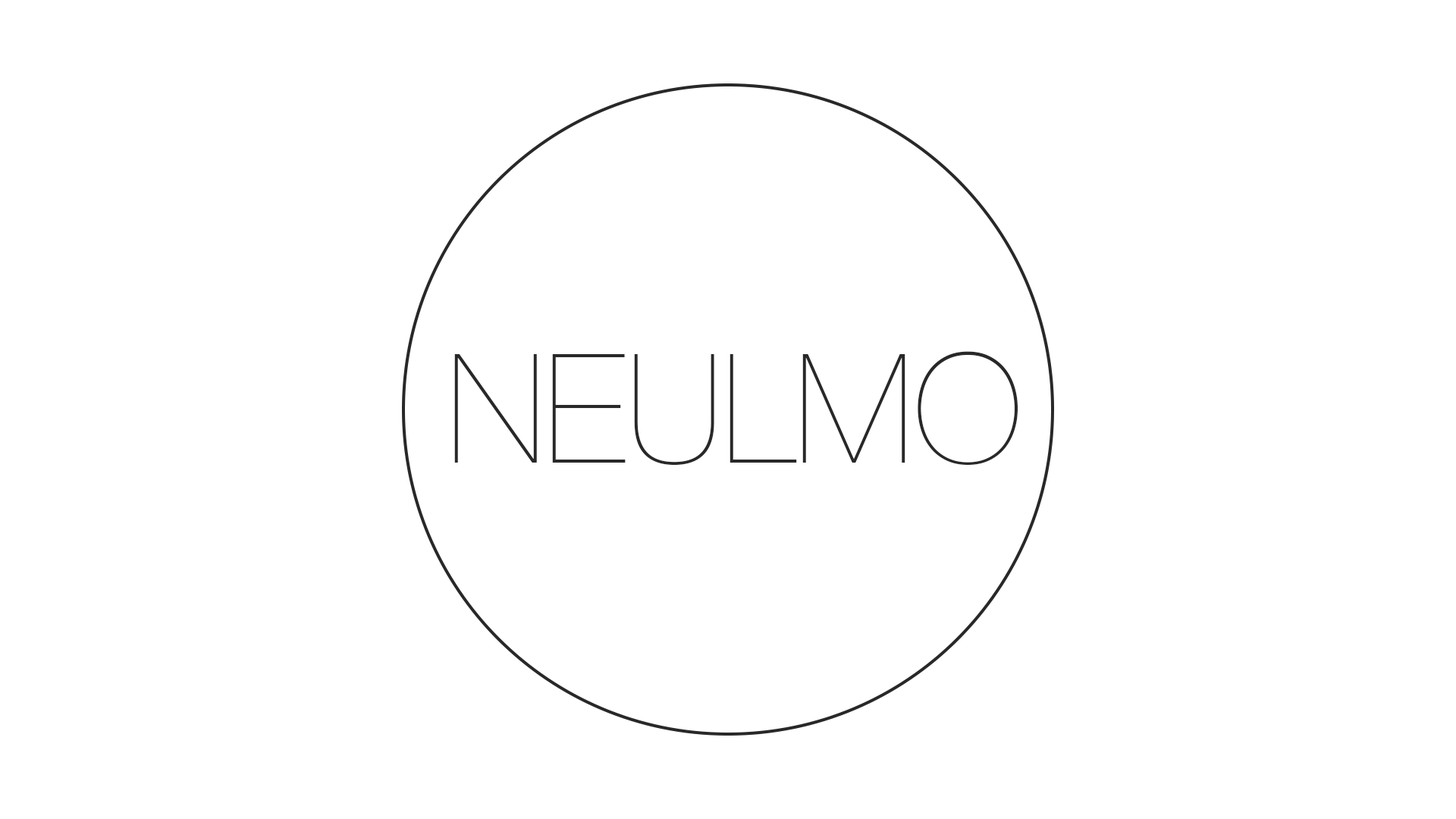
<style>
.page{position:relative;width:1456px;height:819px;background:#ffffff}
.page>*{position:absolute;margin:0}
.t1{font:151.7px "HelveticaNeue-UltraLight";color:#282828}
</style>
<div class="page">
<p class="t1" style="left:454px;top:351px;width:564px;height:114px">NEULMO</p>
</div>
